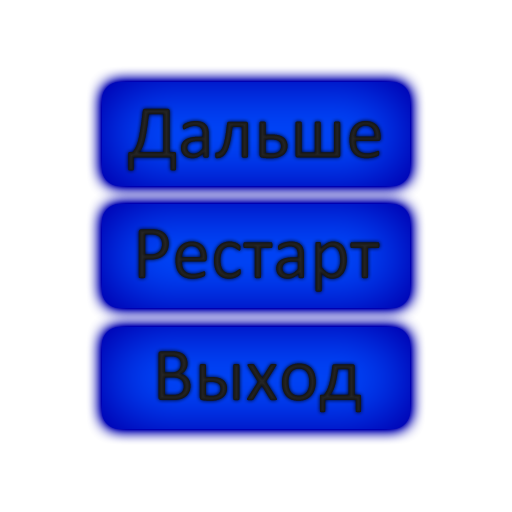
<style>
.page{position:relative;width:512px;height:512px;background:#ffffff}
.page>*{position:absolute;margin:0}
.t1{font:77px "Calibri";color:#1d1d1d}
</style>
<div class="page">
<p class="t1" style="left:128px;top:108px;width:253px;height:63px">Дальше</p>
<p class="t1" style="left:138px;top:229px;width:242px;height:63px">Рестарт</p>
<p class="t1" style="left:158px;top:351px;width:203px;height:62px">Выход</p>
</div>
